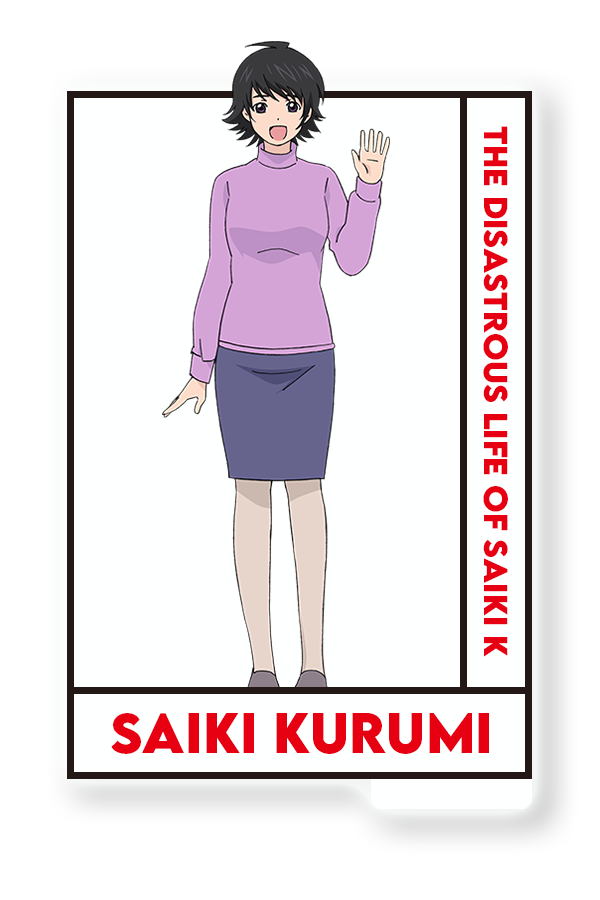
<style>
.page{position:relative;width:600px;height:900px;background:#feffff}
.page>*{position:absolute;margin:0}
.t1{font:29.6px "LEMONMILK-Bold";color:#e70012}
.t2{font:50.5px "LEMONMILK-Bold";color:#e70012}
</style>
<div class="page">
<p class="t1" style="left:483px;top:126px;width:25px;height:531px;rotate:90deg">THE disastrous Life of saiki K</p>
<p class="t2" style="left:111px;top:713px;width:378px;height:41px">Saiki Kurumi</p>
</div>
